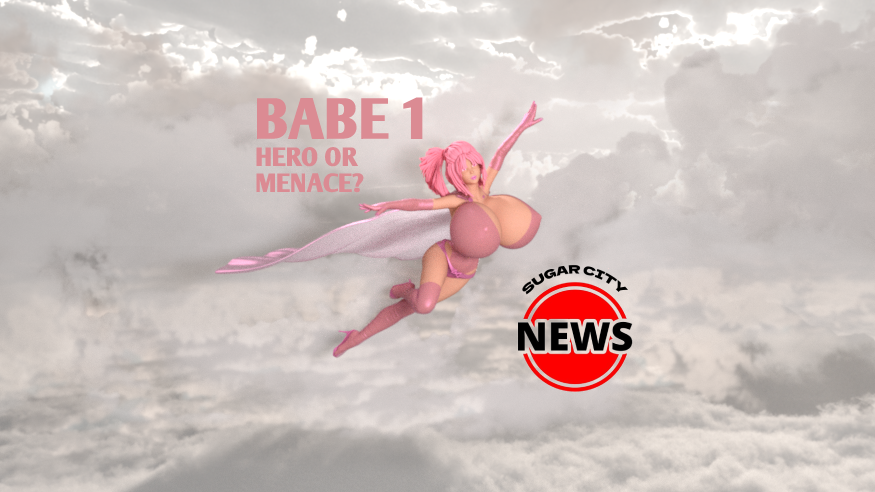
<style>
.page{position:relative;width:875px;height:492px}
.page>*{position:absolute;margin:0}
.t1{font:57px "ArmWrestler-Bold";color:#db8b93}
.t2{font:26px "ArmWrestler-Bold";color:#db8b93}
</style>
<div class="page">
<p class="t1" style="left:257px;top:97px;width:166px;height:42px">BABE 1</p>
<p class="t2" style="left:256px;top:147px;width:103px;height:20px">HERO OR</p>
<p class="t2" style="left:256px;top:173px;width:108px;height:20px">MENACE?</p>
</div>
